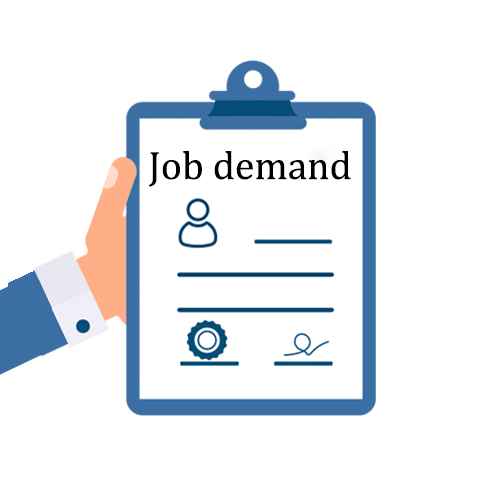
<style>
.page{position:relative;width:500px;height:500px;background:#ffffff}
.page>*{position:absolute;margin:0}
.t1{font:40px "Cambria";color:#000000}
</style>
<div class="page">
<p class="t1" style="left:149px;top:151px;width:202px;height:36px">Job demand</p>
</div>
